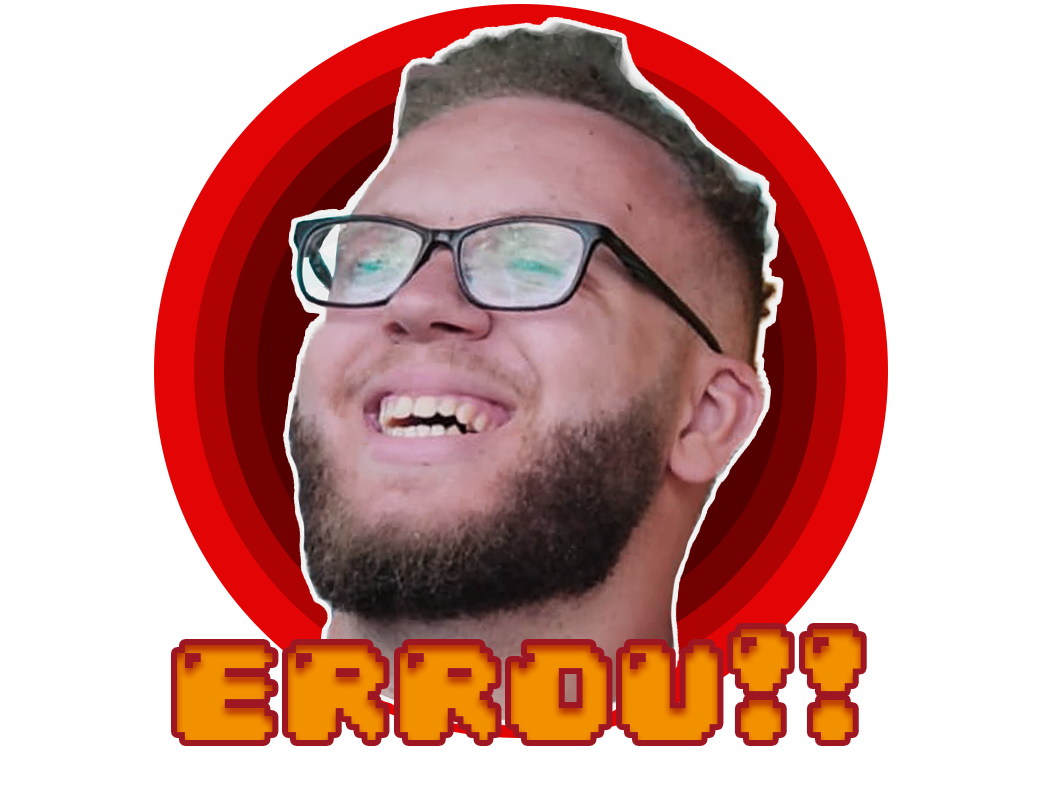
<style>
.page{position:relative;width:1041px;height:787px;background:#ffffff}
.page>*{position:absolute;margin:0}
.t1{font:135.1px "04b30";color:#f29100}
</style>
<div class="page">
<p class="t1" style="left:177px;top:629px;width:684px;height:111px">errou!!</p>
</div>
